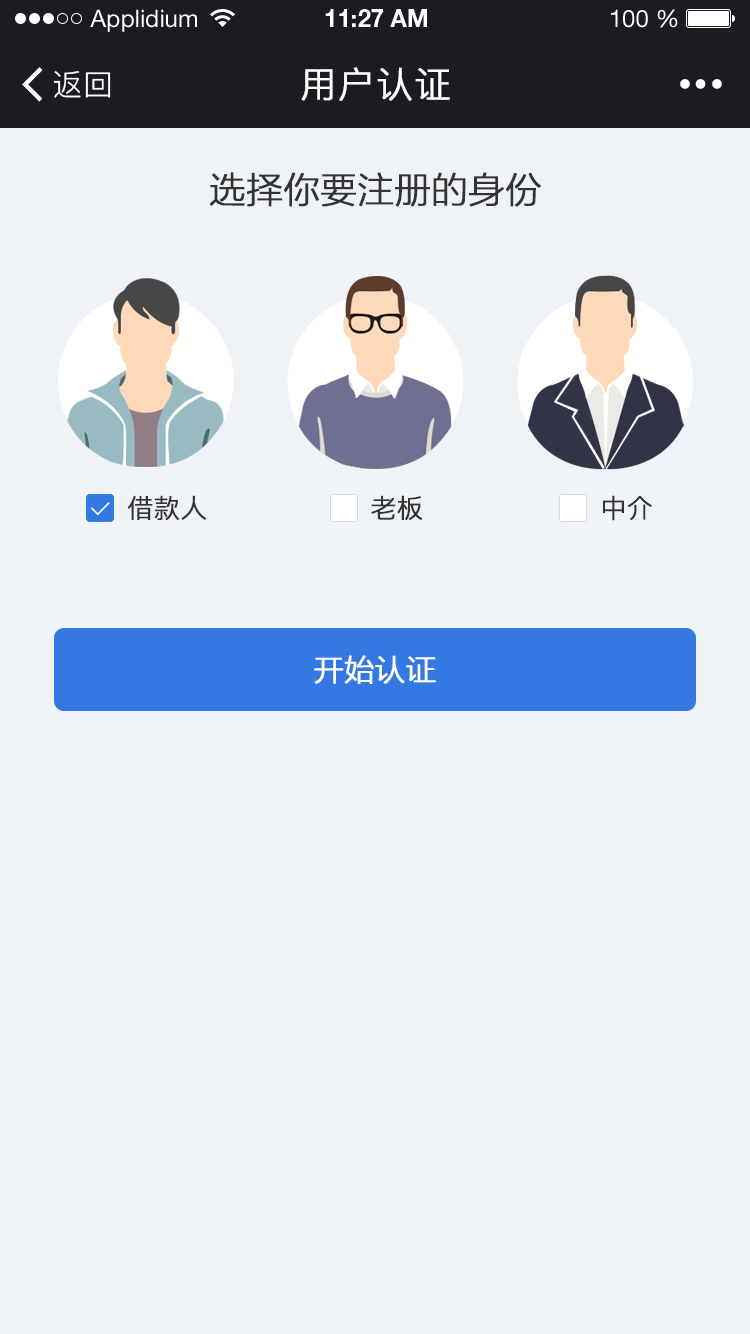
<style>
.page{position:relative;width:750px;height:1334px;background:#eff3f6}
.page>*{position:absolute;margin:0}
.t1{font:24px "HelveticaNeueLTStd-Roman";color:#ffffff}
.t2{font:24px "HelveticaNeueLTStd-Bd";color:#ffffff}
.t3{font:30px "PingFang-SC-Regular";letter-spacing:0.025em;color:#ffffff}
.t4{font:36px "PingFang-SC-Regular";letter-spacing:0.025em;color:#ffffff;font-weight:bold}
.t5{font:36px "FZLTXHK--GBK1-0";color:#333333;font-weight:bold}
.t6{font:26px "PingFang-SC-Regular";color:#333333;font-weight:bold}
.t7{font:30px "FZLTXHK--GBK1-0";color:#ffffff;font-weight:bold}
</style>
<div class="page">
<p class="t1" style="left:90px;top:9px;width:107px;height:23px">Applidium</p>
<p class="t2" style="left:325px;top:9px;width:102px;height:18px">11:27 AM</p>
<p class="t1" style="left:611px;top:9px;width:67px;height:19px">100 %</p>
<p class="t3" style="left:53px;top:71px;width:58px;height:27px">返回</p>
<p class="t4" style="left:301px;top:67px;width:149px;height:34px">用户认证</p>
<p class="t5" style="left:209px;top:172px;width:332px;height:35px">选择你要注册的身份</p>
<p class="t6" style="left:128px;top:495px;width:79px;height:25px">借款人</p>
<p class="t6" style="left:371px;top:495px;width:51px;height:25px">老板</p>
<p class="t6" style="left:603px;top:495px;width:49px;height:26px">中介</p>
<p class="t7" style="left:314px;top:655px;width:122px;height:29px">开始认证</p>
</div>
